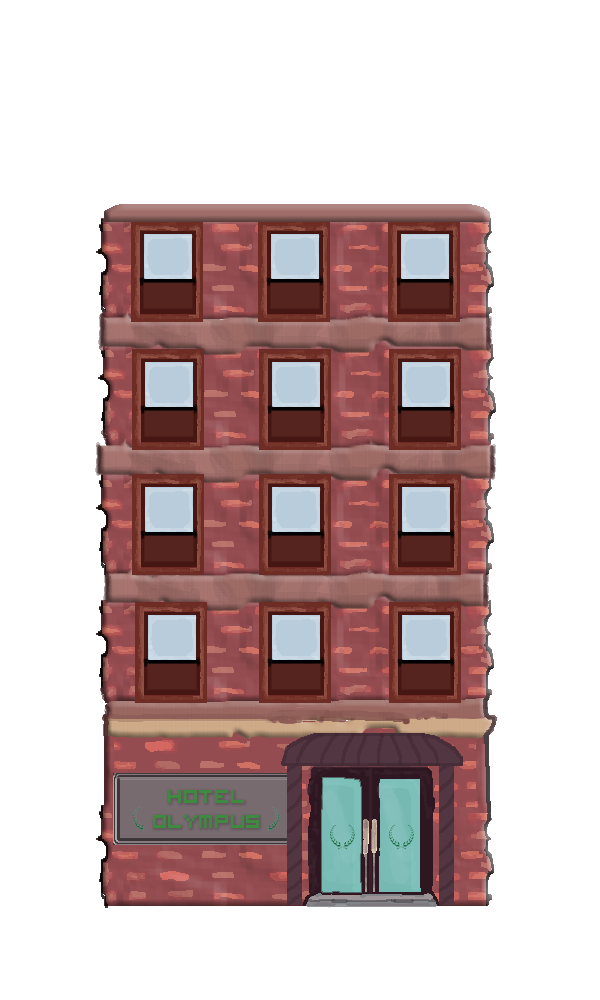
<style>
.page{position:relative;width:600px;height:1000px;background:#ffffff}
.page>*{position:absolute;margin:0}
.t1{font:33.3px/25px "VisitorTT2BRK";color:#3e8b3f}
</style>
<div class="page">
<p class="t1" style="left:153px;top:790px;width:106px;height:38px;text-align:center">Hotel<br>Olympus</p>
</div>
